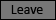
<style>
.page{position:relative;width:56px;height:20px;background:#777777}
.page>*{position:absolute;margin:0}
.t1{font:14px "Calibri";color:#000000}
</style>
<div class="page">
<p class="t1" style="left:11px;top:5px;width:32px;height:9px">Leave</p>
</div>
